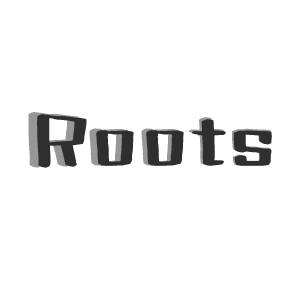
<style>
.page{position:relative;width:300px;height:300px;background:#ffffff}
.page>*{position:absolute;margin:0}
.t1{font:91.5px "FZZJ-QNTJW--GB1-0"}
.t2{font:88.1px "FZZJ-QNTJW--GB1-0";color:#2f2f2f}
</style>
<div class="page">
<p class="t1" style="left:28px;top:112px;width:244px;height:56px">Roots</p>
<p class="t2" style="left:37px;top:114px;width:235px;height:54px">Roots</p>
</div>
